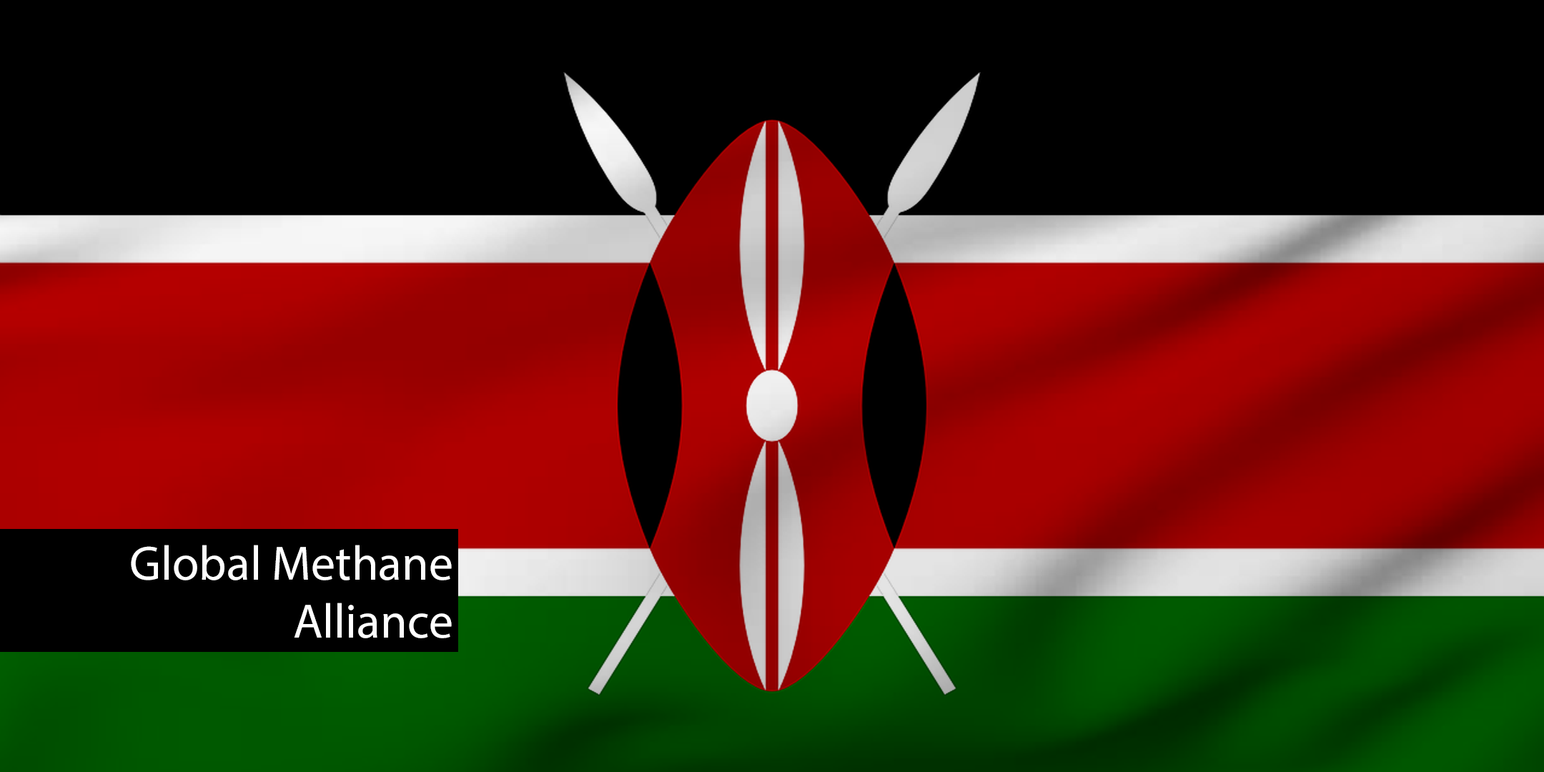
<style>
.page{position:relative;width:1544px;height:772px;background:#000000}
.page>*{position:absolute;margin:0}
.t1{font:48.6px "MyriadPro-Regular";color:#ffffff}
</style>
<div class="page">
<p class="t1" style="left:131px;top:545px;width:321px;height:93px;text-align:right">Global Methane<br> Alliance</p>
</div>
